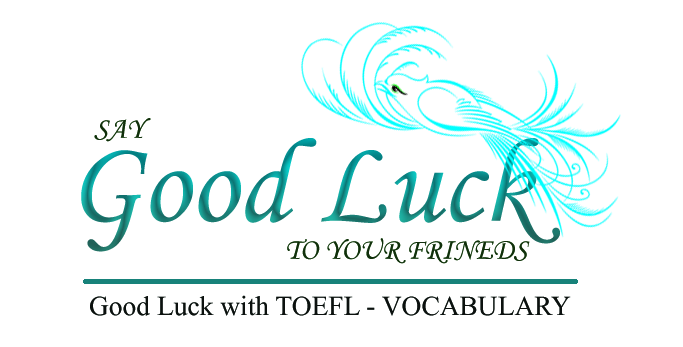
<style>
.page{position:relative;width:683px;height:347px;background:#ffffff}
.page>*{position:absolute;margin:0}
.t1{font:30px "MonotypeCorsiva";color:#112f0c}
.t2{font:120px "MonotypeCorsiva"}
.t3{font:41px "MicrosoftHimalaya";color:#0c110f}
</style>
<div class="page">
<p class="t1" style="left:94px;top:118px;width:57px;height:24px">SAY</p>
<p class="t2" style="left:81px;top:138px;width:479px;height:114px">Good Luck</p>
<p class="t1" style="left:287px;top:238px;width:243px;height:26px">TO YOUR FRINEDS</p>
<p class="t3" style="left:90px;top:295px;width:481px;height:21px">Good Luck with TOEFL - VOCABULARY</p>
</div>
